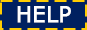
<style>
.page{position:relative;width:87px;height:30px;background:#002060}
.page>*{position:absolute;margin:0}
.t1{font:21px "Verdana";color:#ffffff;font-weight:bold}
</style>
<div class="page">
<p class="t1" style="left:17px;top:6px;width:54px;height:17px">HELP</p>
</div>
